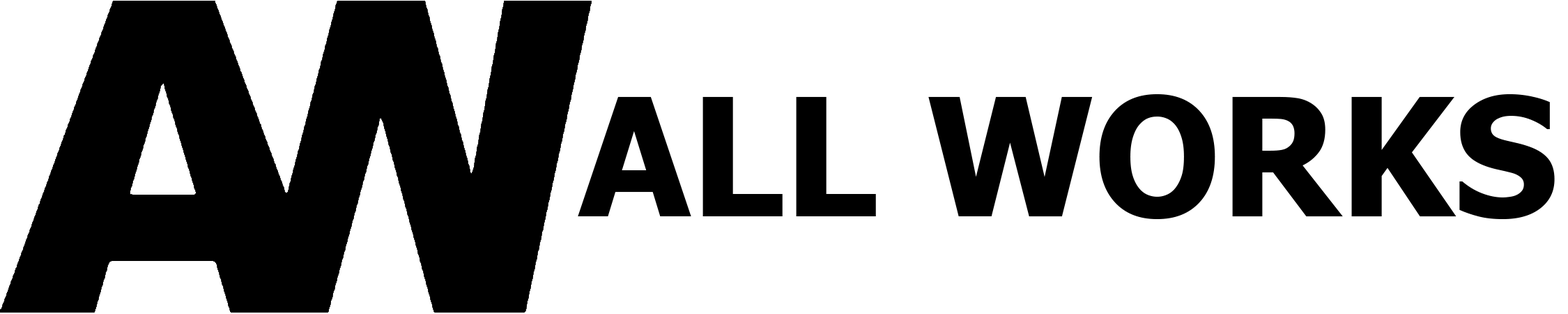
<style>
.page{position:relative;width:1568px;height:314px;background:#ffffff}
.page>*{position:absolute;margin:0}
.t1{font:163.8px "Tahoma-Bold";color:#000000}
</style>
<div class="page">
<p class="t1" style="left:578px;top:93px;width:977px;height:126px">ALL WORKS</p>
</div>
